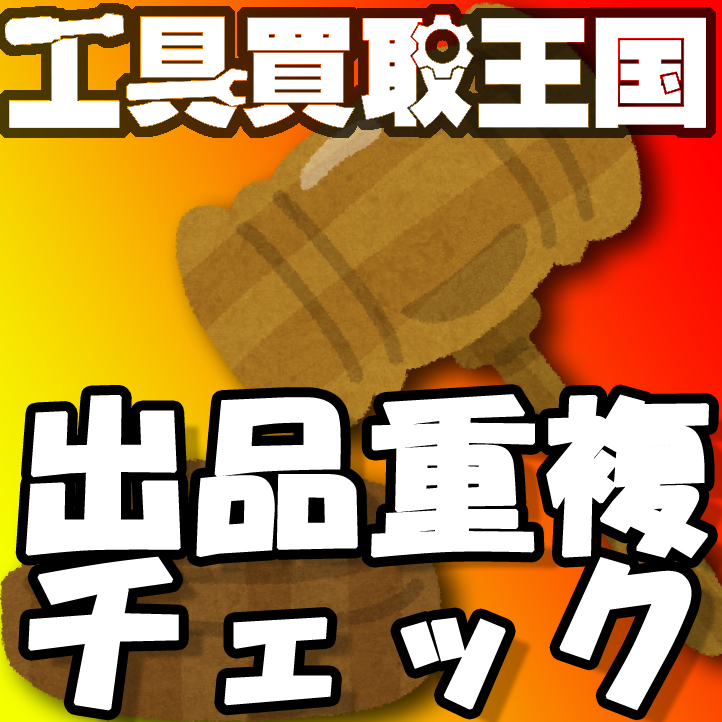
<style>
.page{position:relative;width:722px;height:722px;background:#ffffff}
.page>*{position:absolute;margin:0}
.t1{font:166px/158px "HGSSoeiKakupoptai";letter-spacing:0.025em;color:#ffffff;font-weight:bold}
</style>
<div class="page">
<p class="t1" style="left:25px;top:394px;width:684px;height:317px;text-align:center">出品重複<br>チェック</p>
</div>
